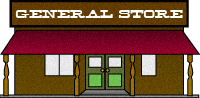
<style>
.page{position:relative;width:200px;height:98px}
.page>*{position:absolute;margin:0}
.t1{font:12px "AldineExpanded";color:#f8fffd}
</style>
<div class="page">
<p class="t1" style="left:15px;top:10px;width:168px;height:8px">General Store</p>
</div>
